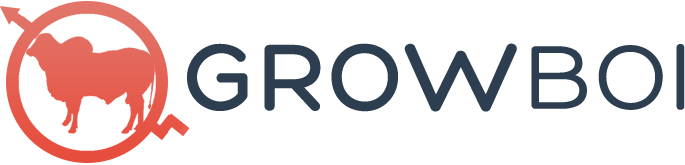
<style>
.page{position:relative;width:685px;height:165px;background:#ffffff}
.page>*{position:absolute;margin:0}
.t1{font:98px "Hero";letter-spacing:0.01em;color:#2c3e50;text-transform:uppercase;font-weight:bold}
.t2{font:98px "Hero";letter-spacing:0.01em;color:#2c3e50;text-transform:uppercase}
</style>
<div class="page">
<p class="t1" style="left:187px;top:43px;width:498px;height:69px">Grow<span class="t2">boi</span></p>
</div>
